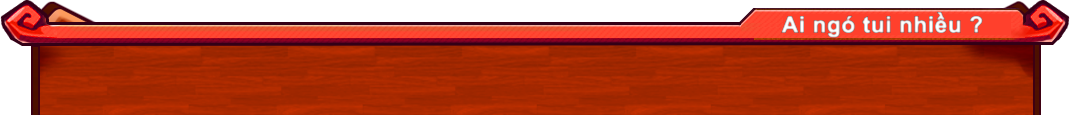
<style>
.page{position:relative;width:1074px;height:115px}
.page>*{position:absolute;margin:0}
.t1{font:22.4px "Arial-BoldMT";color:#eeeeee;font-weight:bold}
</style>
<div class="page">
<p class="t1" style="left:781px;top:12px;width:202px;height:26px">Ai ngó tui nhiều ?</p>
</div>
